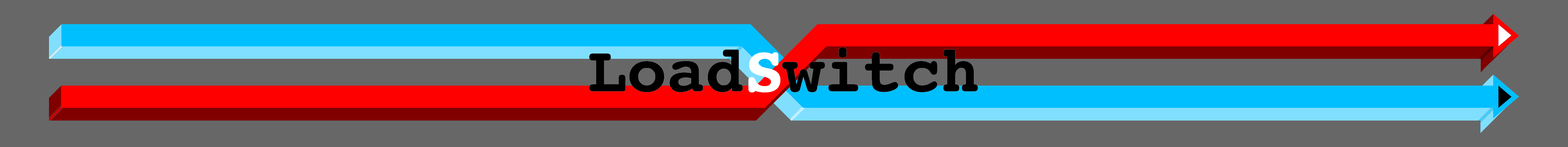
<style>
.page{position:relative;width:1568px;height:147px;background:#676767}
.page>*{position:absolute;margin:0}
.t1{font:65.3px "Courier-Bold";color:#000000}
.t2{font:65.3px "Courier-Bold";color:#ffffff}
</style>
<div class="page">
<p class="t1" style="left:589px;top:47px;width:389px;height:45px">LoadSwitch</p>
<p class="t1" style="left:589px;top:47px;width:389px;height:45px">Load<span class="t2">S</span>witch</p>
</div>
